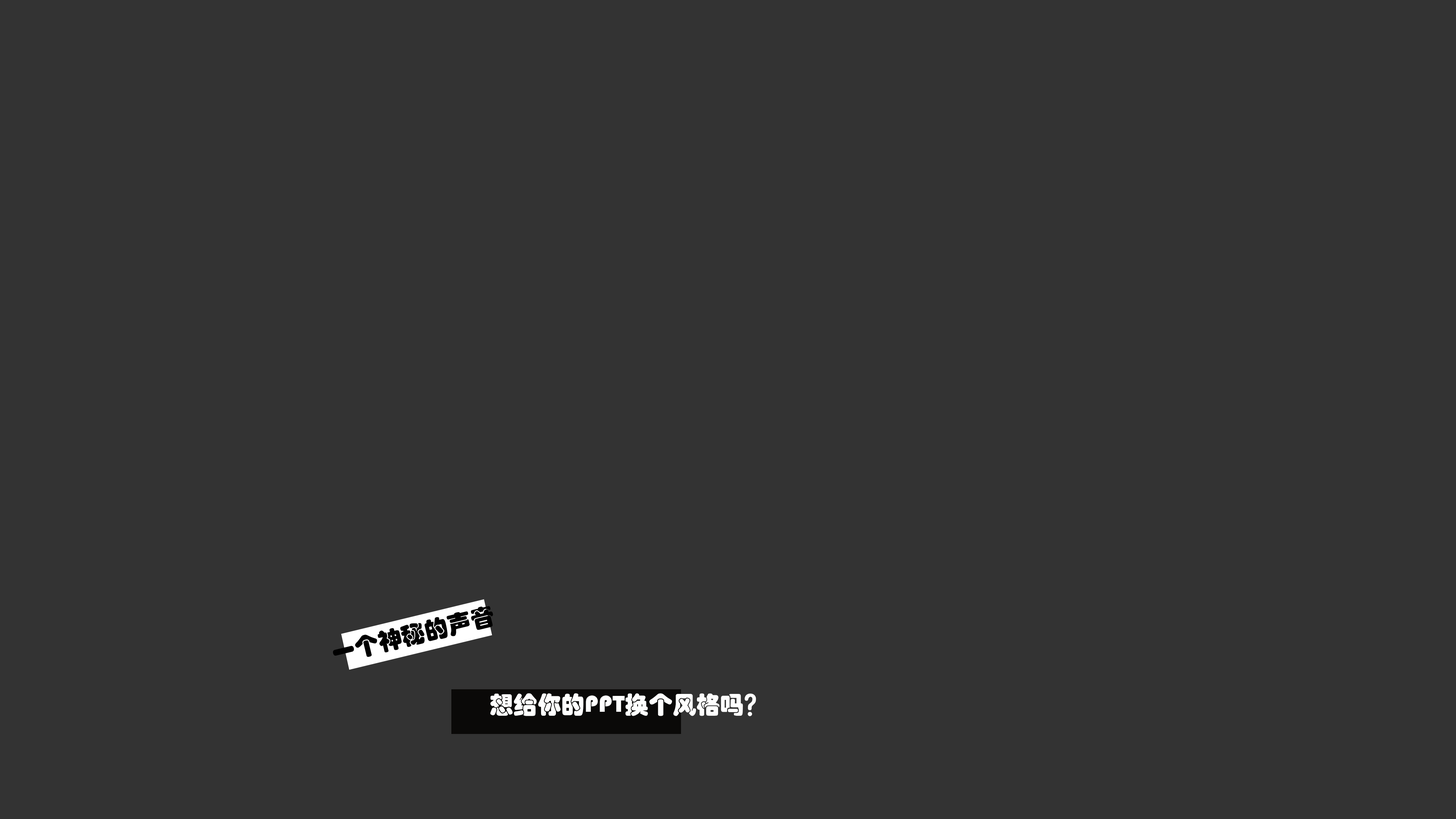
<style>
.page{position:relative;width:1456px;height:819px;background:#333333}
.page>*{position:absolute;margin:0}
.t1{font:23.8px "STHupo";color:#000000}
.t2{font:23.8px "STHupo";color:#ffffff}
</style>
<div class="page">
<p class="t1" style="left:333px;top:606px;width:160px;height:51px;rotate:-14deg">一个神秘的声音</p>
<p class="t2" style="left:490px;top:693px;width:266px;height:23px">想给你的PPT换个风格吗？</p>
</div>
